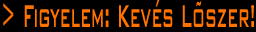
<style>
.page{position:relative;width:256px;height:32px;background:#000000}
.page>*{position:absolute;margin:0}
.t1{font:42px "BankGothicBT-Medium";color:#ff7200;scale:0.42 1}
</style>
<div class="page">
<p class="t1" style="left:3px;top:0px;width:251px;height:27px">&gt; Figyelem: Kevés Lõszer!</p>
</div>
